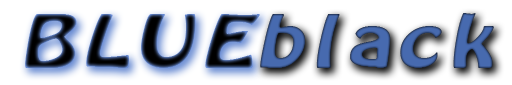
<style>
.page{position:relative;width:512px;height:85px;background:#ffffff}
.page>*{position:absolute;margin:0}
.t1{font:62.5px "BATAVIA";letter-spacing:0.2em}
.t2{font:62.5px "BATAVIA";letter-spacing:0.2em;color:#476aaf}
</style>
<div class="page">
<p class="t1" style="left:25px;top:14px;width:235px;height:54px">BLUE</p>
<p class="t2" style="left:260px;top:13px;width:234px;height:55px">black</p>
</div>
